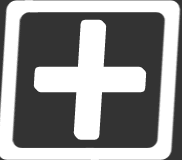
<style>
.page{position:relative;width:182px;height:160px;background:#333333}
.page>*{position:absolute;margin:0}
.t1{font:200.4px "MyriadPro-Regular";color:#ffffff;font-weight:bold;scale:0.95 1}
</style>
<div class="page">
<p class="t1" style="left:37px;top:23px;width:106px;height:113px">+</p>
</div>
